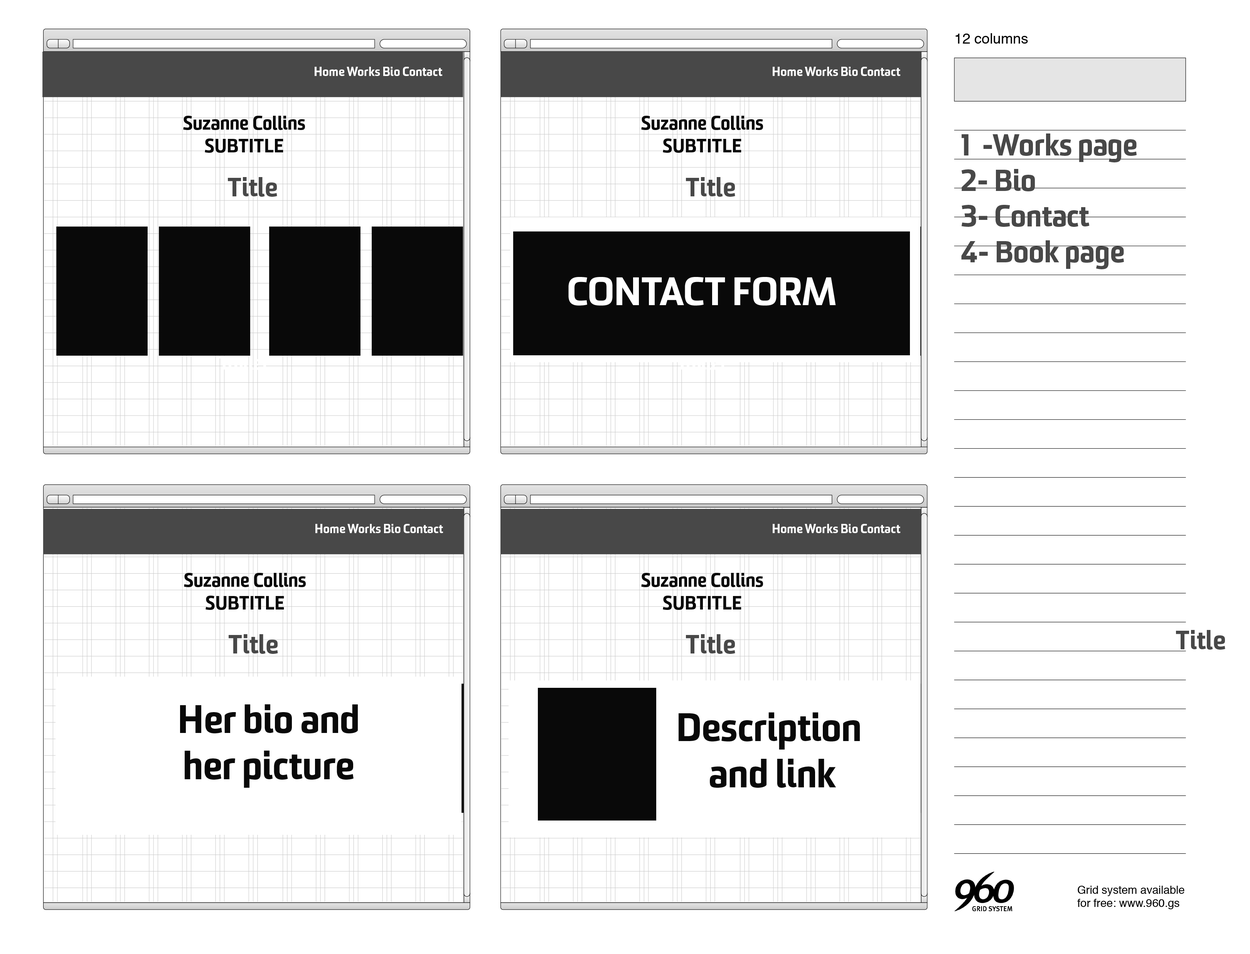
<style>
.page{position:relative;width:1250px;height:954px;background:#ffffff}
.page>*{position:absolute;margin:0}
.t1{font:12.5px "SommetBlack";color:#ffffff}
.t2{font:18.7px "SommetBlack";color:#090909}
.t3{font:29.7px "SommetBlack";color:#484848}
.t4{font:25.7px "SommetBlack";color:#484848}
.t5{font:38.6px "SommetBlack";color:#ffffff}
.t6{font:38.6px "SommetBlack";color:#090909}
</style>
<div class="page">
<p class="t1" style="left:315px;top:67px;width:128px;height:9px">Home Works Bio Contact</p>
<p class="t1" style="left:773px;top:67px;width:128px;height:9px">Home Works Bio Contact</p>
<p class="t2" style="left:183px;top:116px;width:122px;height:37px;text-align:center">Suzanne Collins <br>SUBTITLE</p>
<p class="t2" style="left:641px;top:116px;width:122px;height:37px;text-align:center">Suzanne Collins <br>SUBTITLE</p>
<p class="t3" style="left:961px;top:133px;width:176px;height:136px">1  -Works page<br>2- Bio<br>3- Contact<br>4- Book page</p>
<p class="t4" style="left:228px;top:177px;width:49px;height:20px">Title</p>
<p class="t4" style="left:686px;top:177px;width:49px;height:20px">Title</p>
<p class="t5" style="left:568px;top:277px;width:268px;height:28px">CONTACT FORM</p>
<p class="t1" style="left:315px;top:524px;width:129px;height:9px">Home Works Bio Contact</p>
<p class="t1" style="left:773px;top:524px;width:128px;height:9px">Home Works Bio Contact</p>
<p class="t2" style="left:184px;top:573px;width:122px;height:37px;text-align:center">Suzanne Collins <br>SUBTITLE</p>
<p class="t2" style="left:641px;top:573px;width:122px;height:37px;text-align:center">Suzanne Collins <br>SUBTITLE</p>
<p class="t4" style="left:1176px;top:630px;width:50px;height:19px">Title</p>
<p class="t4" style="left:229px;top:634px;width:49px;height:20px">Title</p>
<p class="t4" style="left:686px;top:634px;width:49px;height:20px">Title</p>
<p class="t6" style="left:180px;top:704px;width:178px;height:84px;text-align:center">Her bio and <br>her picture</p>
<p class="t6" style="left:679px;top:712px;width:181px;height:76px;text-align:center">Description <br>and link</p>
</div>
